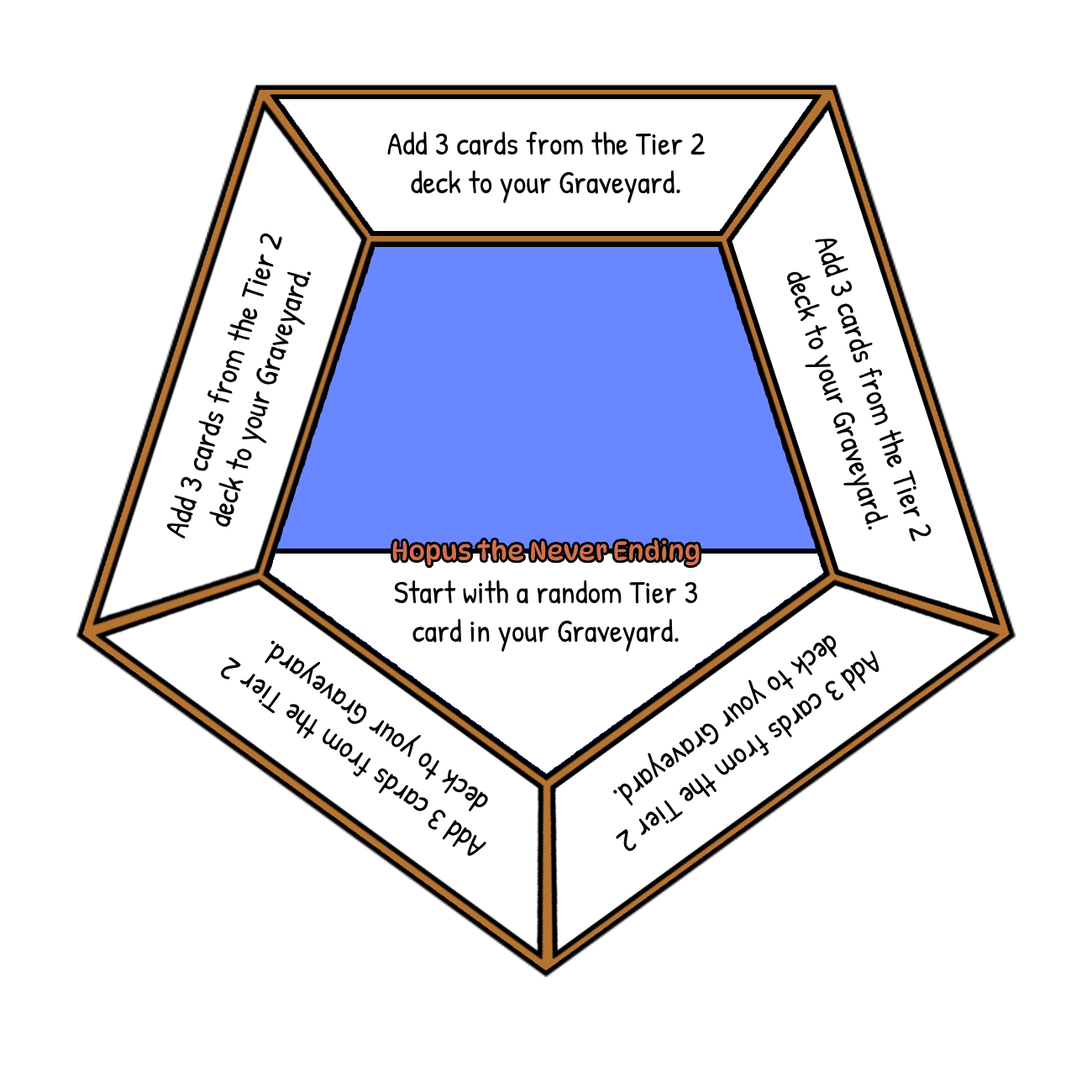
<style>
.page{position:relative;width:1092px;height:1092px;background:#ffffff}
.page>*{position:absolute;margin:0}
.t1{font:31.9px "PatrickHand-Regular";color:#000000}
.t2{font:26px "DynaPuff-Regular";color:#d16f50}
</style>
<div class="page">
<p class="t1" style="left:387px;top:131px;width:318px;height:72px;text-align:center">Add 3 cards from the Tier 2<br>deck to your Graveyard.</p>
<p class="t1" style="left:166px;top:233px;width:146px;height:305px;text-align:center;rotate:-72deg">Add 3 cards from the Tier 2<br>deck to your Graveyard.</p>
<p class="t1" style="left:787px;top:239px;width:145px;height:303px;text-align:center;rotate:72deg">Add 3 cards from the Tier 2<br>deck to your Graveyard.</p>
<p class="t2" style="left:392px;top:539px;width:308px;height:27px">Hopus the Never Ending</p>
<p class="t1" style="left:394px;top:580px;width:304px;height:72px;text-align:center">Start with a random Tier 3<br>card in your Graveyard.</p>
<p class="t1" style="left:221px;top:640px;width:267px;height:216px;text-align:center;rotate:-144deg">Add 3 cards from the Tier 2<br>deck to your Graveyard.</p>
<p class="t1" style="left:613px;top:635px;width:266px;height:216px;text-align:center;rotate:144deg">Add 3 cards from the Tier 2<br>deck to your Graveyard.</p>
</div>
